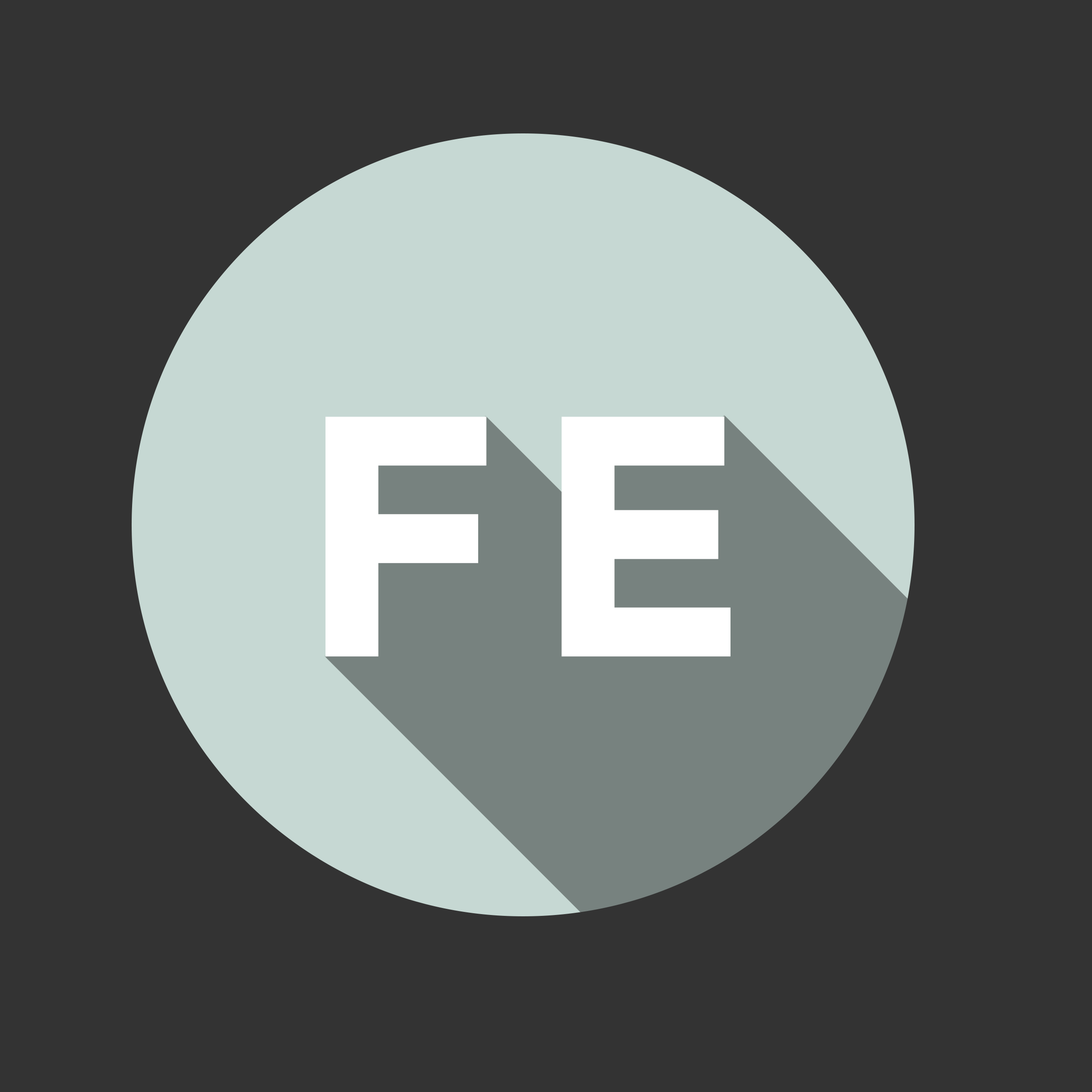
<style>
.page{position:relative;width:1092px;height:1092px;background:#333333}
.page>*{position:absolute;margin:0}
.t1{font:338.3px "Avenir-Black";letter-spacing:0.105em;color:#ffffff}
</style>
<div class="page">
<p class="t1" style="left:325px;top:417px;width:405px;height:240px">FE</p>
</div>
